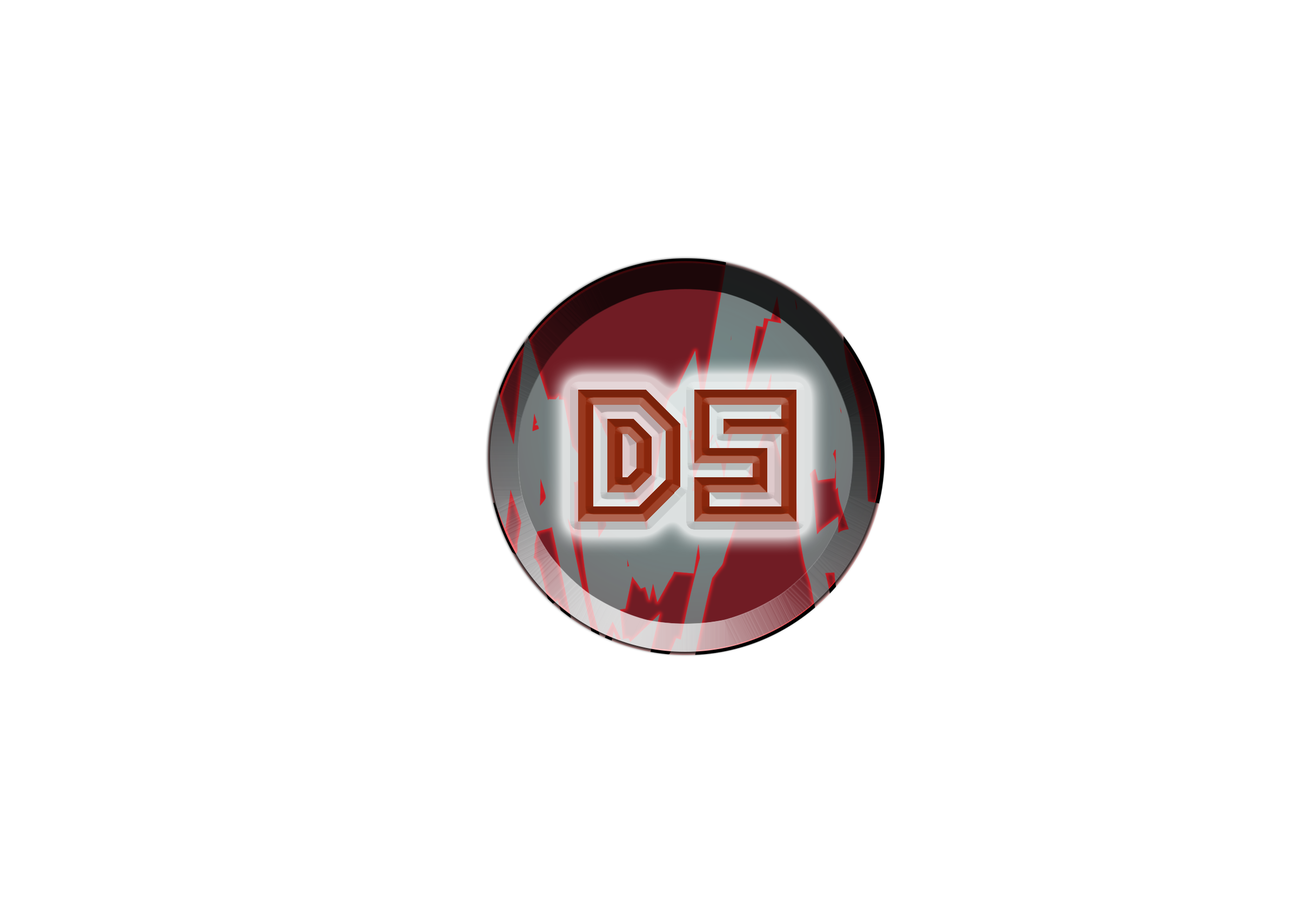
<style>
.page{position:relative;width:1313px;height:908px;background:#ffffff}
.page>*{position:absolute;margin:0}
.t1{font:225.2px "Unlearned2BRK";color:#91290d}
</style>
<div class="page">
<p class="t1" style="left:578px;top:390px;width:219px;height:132px">DS</p>
</div>
